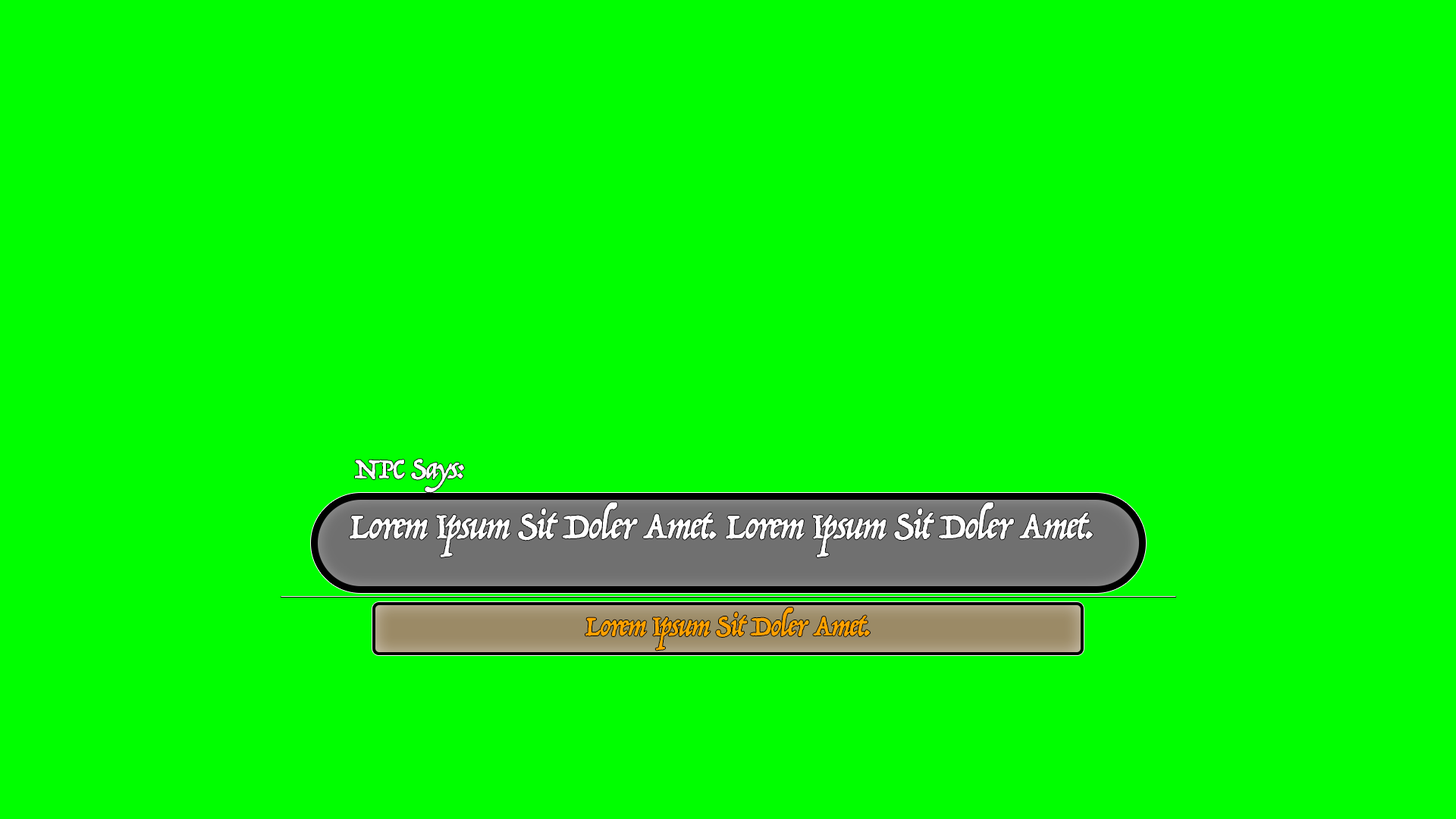
<style>
.page{position:relative;width:1456px;height:819px;background:#00ff00}
.page>*{position:absolute;margin:0}
.t1{font:31.6px "Trattatello";letter-spacing:-0.04em;color:#ffffff}
.t2{font:40.7px "Trattatello";letter-spacing:-0.04em;color:#ffffff}
.t3{font:31.6px "Trattatello";letter-spacing:-0.04em;color:#fea100}
</style>
<div class="page">
<p class="t1" style="left:355px;top:459px;width:109px;height:34px">NPC Says:</p>
<p class="t2" style="left:350px;top:502px;width:743px;height:55px">Lorem Ipsum Sit Doler Amet. Lorem Ipsum Sit Doler Amet.</p>
<p class="t3" style="left:585px;top:607px;width:285px;height:44px">Lorem Ipsum Sit Doler Amet.</p>
</div>
